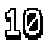
<style>
.page{position:relative;width:48px;height:48px;background:#ffffff}
.page>*{position:absolute;margin:0}
.t1{font:36px "KarmaFuture-Regular";color:#010101}
</style>
<div class="page">
<p class="t1" style="left:5px;top:8px;width:38px;height:32px">10</p>
</div>
